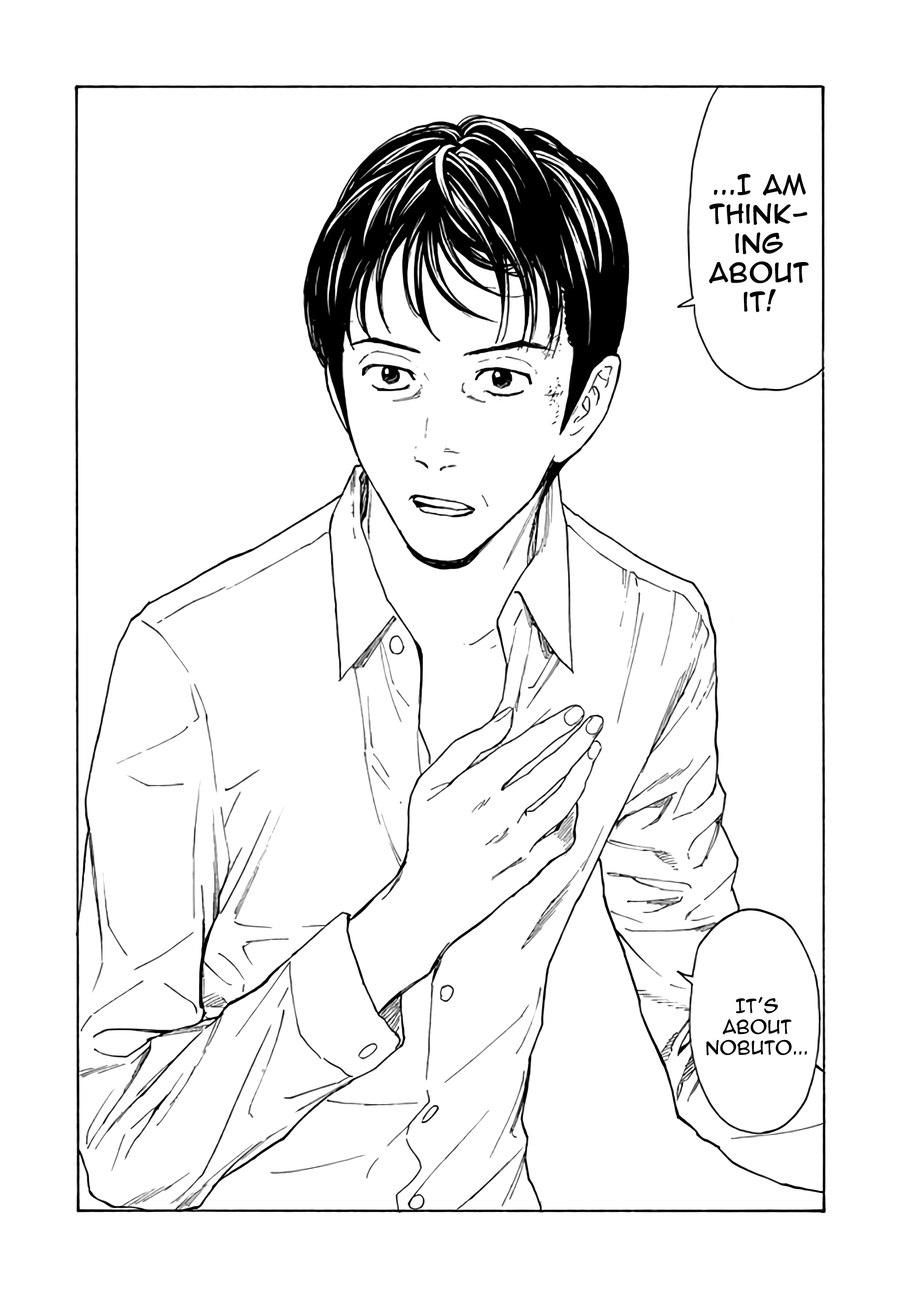
<style>
.page{position:relative;width:916px;height:1302px;background:#ffffff}
.page>*{position:absolute;margin:0}
.t1{font:24.4px "AnimeAce2.0BB";color:#000000;font-weight:bold}
.t2{font:17.4px "AnimeAce2.0BB";color:#000000}
</style>
<div class="page">
<p class="t1" style="left:709px;top:173px;width:99px;height:139px;text-align:center">...I am thinking about it!</p>
<p class="t2" style="left:706px;top:997px;width:101px;height:59px;text-align:center">It’s about Nobuto...</p>
</div>
